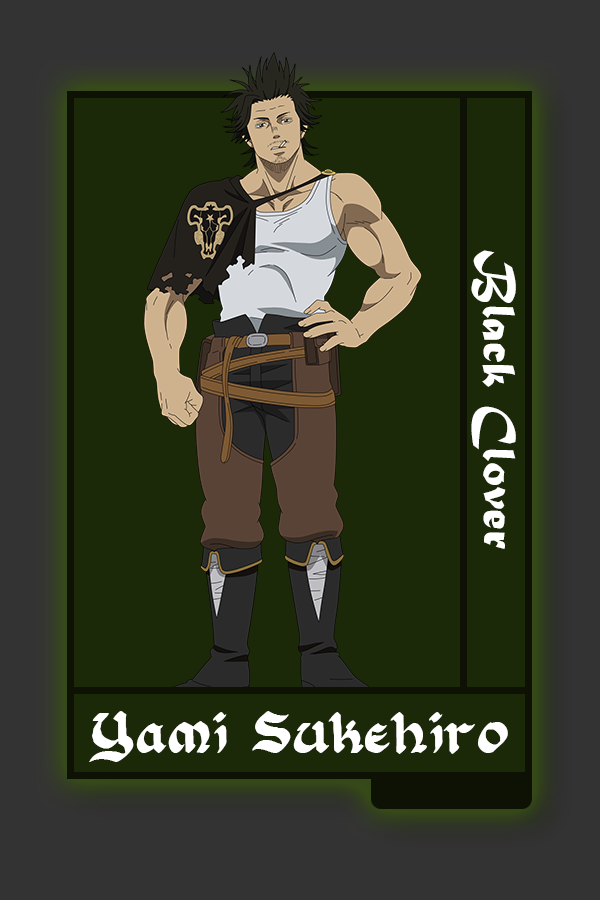
<style>
.page{position:relative;width:600px;height:900px;background:#1b2908}
.page>*{position:absolute;margin:0}
.t1{font:48.8px "MaturaMTScriptCapitals";color:#ffffff}
.t2{font:49.8px "FloranteatLaura";color:#ffffff}
</style>
<div class="page">
<p class="t1" style="left:471px;top:250px;width:45px;height:299px;rotate:90deg">Black Clover</p>
<p class="t2" style="left:89px;top:711px;width:419px;height:51px">Yami Sukehiro</p>
</div>
